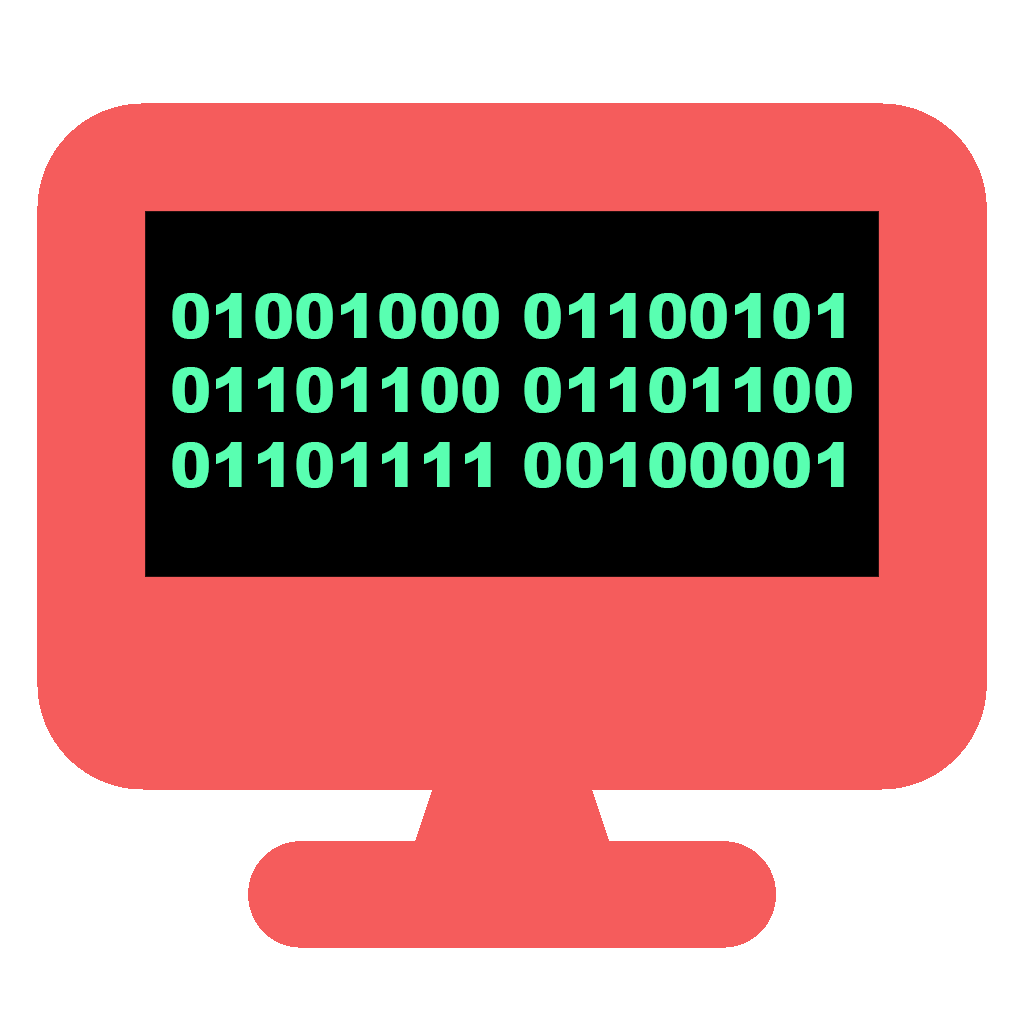
<style>
.page{position:relative;width:1024px;height:1024px;background:#f55c5c}
.page>*{position:absolute;margin:0}
.t1{font:62.2px "Arial-Black";color:#59ffb1}
</style>
<div class="page">
<p class="t1" style="left:172px;top:293px;width:680px;height:195px;text-align:center">01001000 01100101 01101100 01101100 01101111 00100001</p>
</div>
